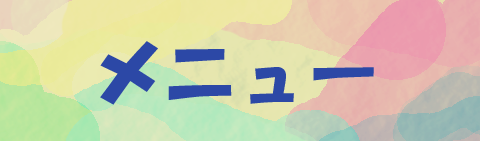
<style>
.page{position:relative;width:480px;height:141px}
.page>*{position:absolute;margin:0}
.t1{font:72px "HGSSoeiKakupoptai";color:#2c48a6}
</style>
<div class="page">
<p class="t1" style="left:100px;top:41px;width:274px;height:64px">メニュー</p>
</div>
